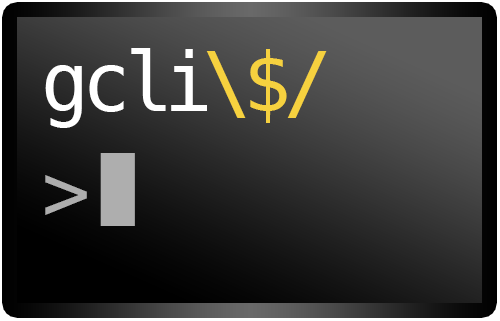
<style>
.page{position:relative;width:500px;height:321px}
.page>*{position:absolute;margin:0}
.t1{font:82.3px "Menlo-Regular";letter-spacing:-0.1em;color:#ffffff}
.t2{font:82.3px "Menlo-Regular";letter-spacing:-0.1em;color:#f6d13f}
.t3{font:82.3px "Menlo-Regular";letter-spacing:-0.1em;color:#aeaeae}
.t4{font:122.2px "Menlo-Regular";letter-spacing:-0.1em;color:#aeaeae}
</style>
<div class="page">
<p class="t1" style="left:45px;top:48px;width:282px;height:80px">gcli<span class="t2">\$/</span></p>
<p class="t3" style="left:45px;top:153px;width:90px;height:73px">&gt;<span class="t4">▮</span></p>
</div>
